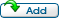
<style>
.page{position:relative;width:59px;height:18px;background:#ffffff}
.page>*{position:absolute;margin:0}
.t1{font:9.4px "Decker-Bold";letter-spacing:0.025em;color:#006496;scale:1.11 1}
</style>
<div class="page">
<p class="t1" style="left:26px;top:7px;width:21px;height:7px">Add</p>
</div>
